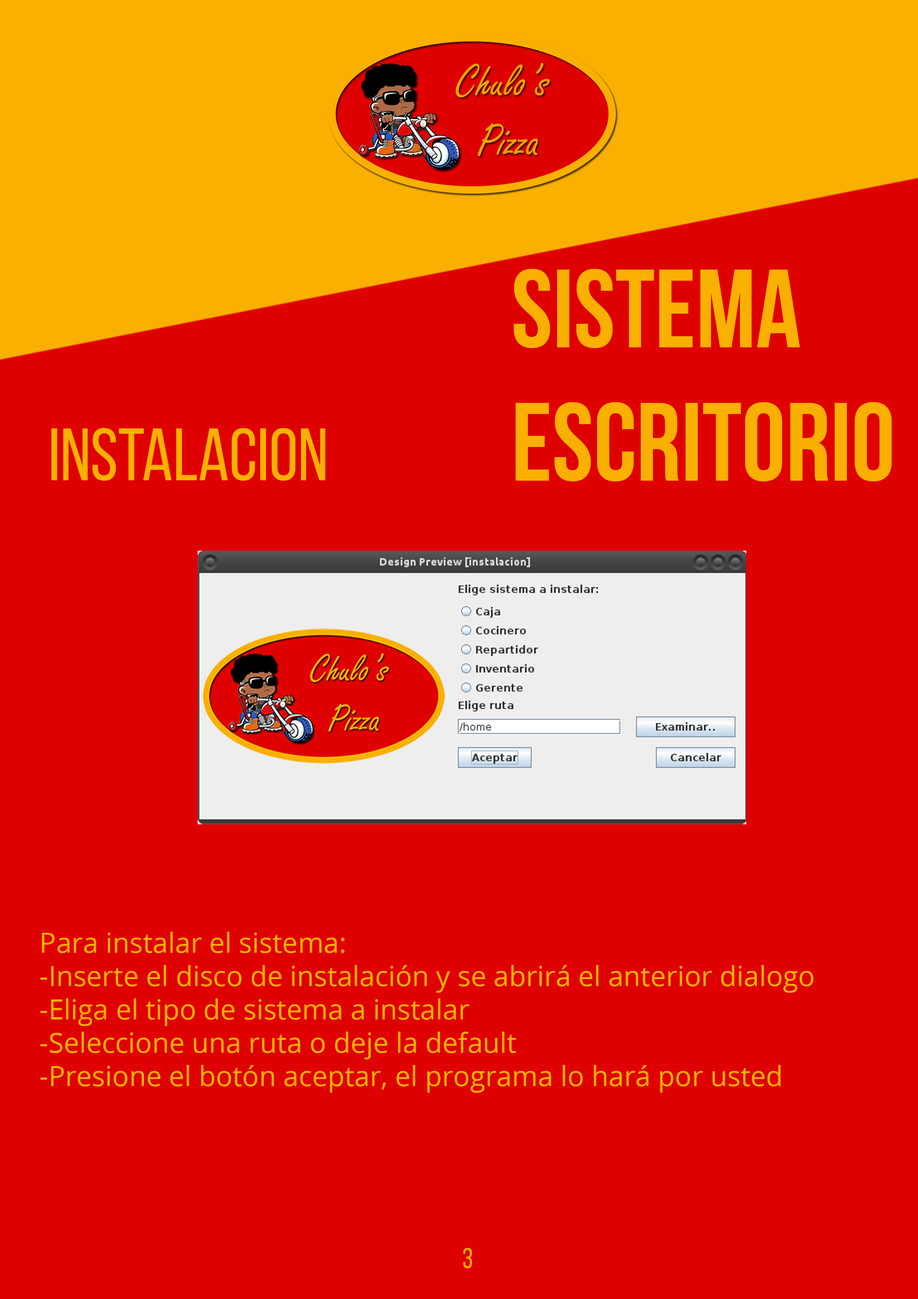
<style>
.page{position:relative;width:918px;height:1299px;background:#df0000}
.page>*{position:absolute;margin:0}
.t1{font:111.1px "BebasNeueBold";color:#fab000}
.t2{font:74px "BebasNeueRegular";color:#fab000}
.t3{font:27.8px "OpenSans";color:#fab000}
.t4{font:27.8px "BebasNeueRegular";color:#fab000}
</style>
<div class="page">
<p class="t1" style="left:514px;top:269px;width:378px;height:212px">SISTEMA<br>ESCRITORIO</p>
<p class="t2" style="left:51px;top:428px;width:274px;height:53px">Instalacion</p>
<p class="t3" style="left:40px;top:931px;width:774px;height:162px">Para instalar el sistema:<br>-Inserte el disco de instalación y se abrirá el anterior dialogo <br>-Eliga el tipo de sistema a instalar<br>-Seleccione una ruta o deje la default<br>-Presione el botón aceptar, el programa lo hará por usted</p>
<p class="t4" style="left:463px;top:1248px;width:9px;height:20px">3</p>
</div>
